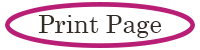
<style>
.page{position:relative;width:200px;height:50px;background:#ffffff}
.page>*{position:absolute;margin:0}
.t1{font:25px "CenturySchoolbook";color:#342b23}
</style>
<div class="page">
<p class="t1" style="left:38px;top:15px;width:124px;height:23px">Print Page</p>
</div>
